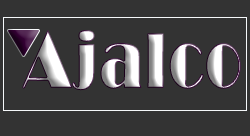
<style>
.page{position:relative;width:250px;height:136px;background:#333333}
.page>*{position:absolute;margin:0}
.t1{font:80.4px "Broadway";letter-spacing:0.005em;font-weight:bold;scale:0.76 1}
</style>
<div class="page">
<p class="t1" style="left:22px;top:30px;width:219px;height:61px">Ajalco</p>
</div>
